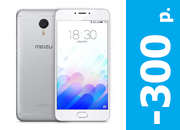
<style>
.page{position:relative;width:180px;height:130px;background:#ffffff}
.page>*{position:absolute;margin:0}
.t1{font:40px "Tahoma-Bold";color:#ffffff}
.t2{font:18px "Tahoma-Bold";color:#ffffff}
.t3{font:18px "Arial-BoldMT";color:#ffffff}
</style>
<div class="page">
<p class="t1" style="left:140px;top:8px;width:34px;height:116px;rotate:-90deg">-300 <span class="t2">р</span><span class="t3">.</span></p>
</div>
